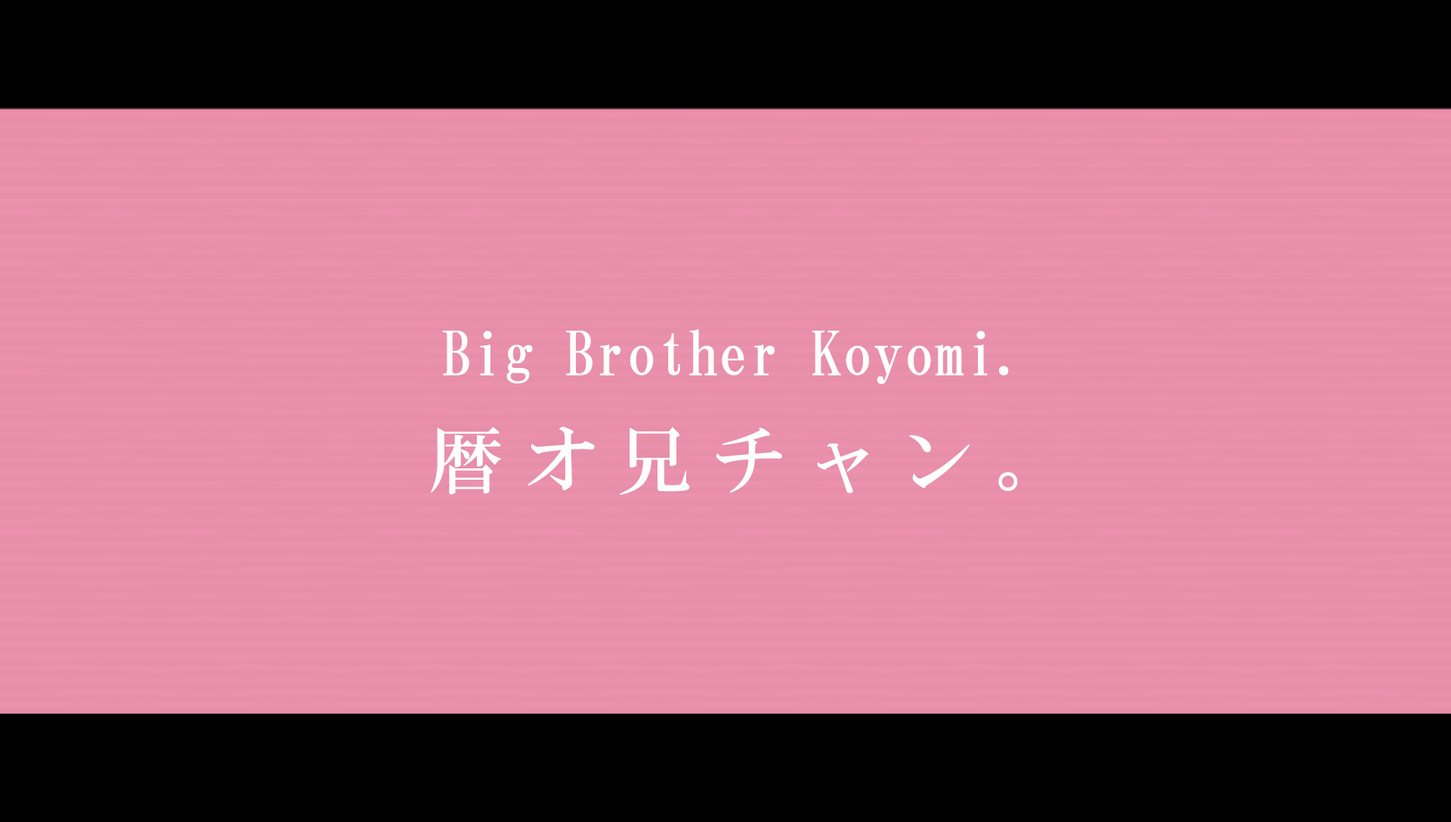
<style>
.page{position:relative;width:1451px;height:822px;background:#e78ea9}
.page>*{position:absolute;margin:0}
.t1{font:60.4px "HGMinchoB";letter-spacing:0.01em;color:#fcfffc}
.t2{font:74px "HGMinchoB";letter-spacing:0.27em;color:#fcfffc}
</style>
<div class="page">
<p class="t1" style="left:442px;top:329px;width:567px;height:56px">Big Brother Koyomi.</p>
<p class="t2" style="left:431px;top:427px;width:587px;height:68px">暦オ兄チャン。</p>
</div>
